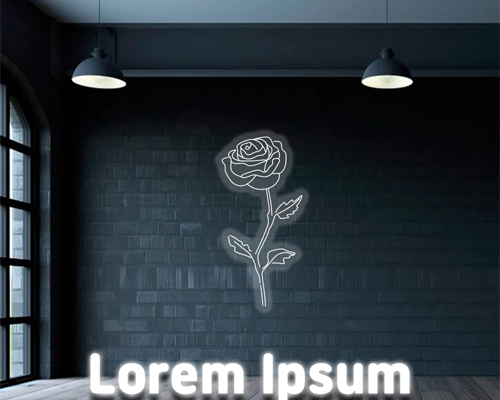
<style>
.page{position:relative;width:500px;height:400px}
.page>*{position:absolute;margin:0}
.t1{font:45px "Jalnan2TTF";letter-spacing:0.025em;color:#ffffff}
</style>
<div class="page">
<p class="t1" style="left:90px;top:353px;width:320px;height:47px">Lorem Ipsum</p>
</div>
